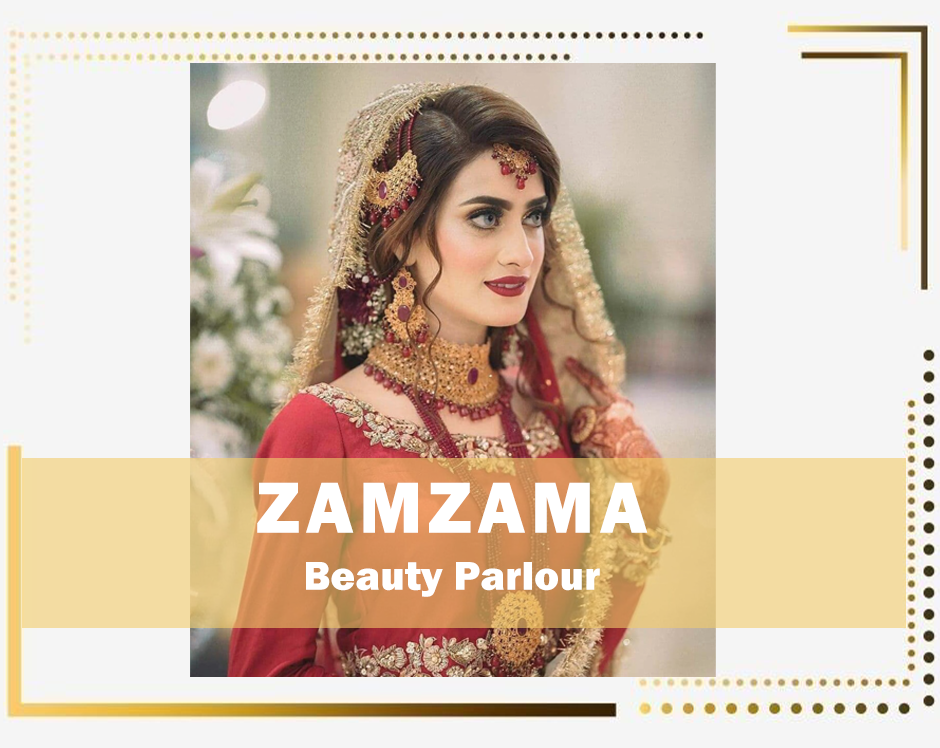
<style>
.page{position:relative;width:940px;height:748px;background:#f5f5f5}
.page>*{position:absolute;margin:0}
.t1{font:75px "FranklinGothic-Heavy";letter-spacing:0.075em;color:#ffffff}
.t2{font:41.7px "FranklinGothic-Heavy";letter-spacing:0.01em;color:#ffffff}
</style>
<div class="page">
<p class="t1" style="left:257px;top:482px;width:391px;height:51px">ZAMZAMA</p>
<p class="t2" style="left:306px;top:562px;width:294px;height:35px">Beauty Parlour</p>
</div>
